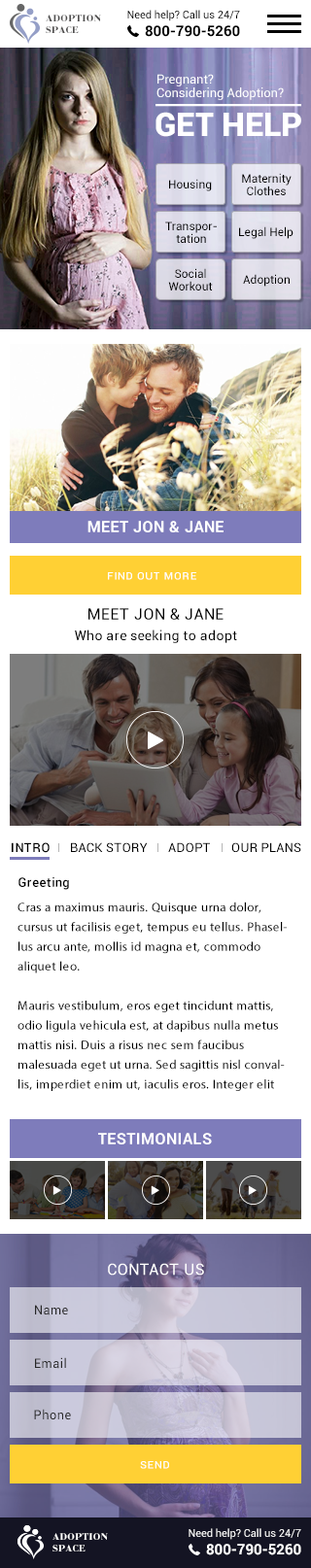
<style>
.page{position:relative;width:311px;height:1568px;background:#ffffff}
.page>*{position:absolute;margin:0}
.t1{font:8.7px/6.8px "Bradobrei";color:#4f4e4e;text-transform:uppercase}
.t2{font:10.7px "Roboto-Regular";color:#000000}
.t3{font:14.6px "Roboto-Bold";color:#000000}
.t4{font:12.5px/8.7px "Roboto-Regular";color:#ffffff}
.t5{font:32.8px "Roboto-Black";color:#ffffff;text-transform:uppercase}
.t6{font:11.7px/8.8px "Roboto-Regular";color:#000000}
.t7{font:11.7px "Roboto-Regular";color:#000000}
.t8{font:15.5px "Roboto-Bold";letter-spacing:0.03em;color:#ffffff;text-transform:uppercase}
.t9{font:12.6px "Roboto-Regular";letter-spacing:0.03em;color:#ffffff;font-variant:small-caps}
.t10{font:15.5px "Roboto-Regular";letter-spacing:0.03em;color:#010101;text-transform:uppercase}
.t11{font:13.6px "Roboto-Regular";letter-spacing:0.03em;color:#000000}
.t12{font:12.6px "Roboto-Medium";letter-spacing:0.03em;color:#000000;text-transform:uppercase}
.t13{font:12.6px "Roboto-Regular";letter-spacing:0.03em;color:#000000;text-transform:uppercase}
.t14{font:12.6px "Roboto-Medium";letter-spacing:0.03em;color:#000000}
.t15{font:12.6px/19.7px "MyriadPro-Regular";letter-spacing:0.03em;color:#000000}
.t16{font:15.5px "Roboto-Regular";letter-spacing:0.03em;color:#ffffff;text-transform:uppercase}
.t17{font:12.6px "Roboto-Regular";letter-spacing:0.04em;color:#282828}
.t18{font:10.7px "Roboto-Regular";color:#ffffff}
.t19{font:8.7px/6.8px "Bradobrei";color:#ffffff;text-transform:uppercase}
.t20{font:14.6px "Roboto-Bold";color:#ffffff}
</style>
<div class="page">
<p class="t1" style="left:46px;top:15px;width:55px;height:18px">Adoption <br>Space</p>
<p class="t2" style="left:127px;top:10px;width:113px;height:11px">Need help? Call us 24/7</p>
<p class="t3" style="left:145px;top:25px;width:95px;height:12px">800-790-5260</p>
<p class="t4" style="left:156px;top:74px;width:128px;height:26px">Pregnant?<br>Considering Adoption?</p>
<p class="t5" style="left:155px;top:112px;width:146px;height:25px">Get Help</p>
<p class="t6" style="left:242px;top:173px;width:49px;height:22px;text-align:center">Maternity<br>Clothes</p>
<p class="t7" style="left:169px;top:179px;width:43px;height:12px">Housing</p>
<p class="t6" style="left:165px;top:222px;width:52px;height:21px;text-align:center">Transpor-<br>tation</p>
<p class="t7" style="left:239px;top:226px;width:54px;height:13px">Legal Help</p>
<p class="t6" style="left:168px;top:268px;width:45px;height:22px;text-align:center">Social<br>Workout</p>
<p class="t7" style="left:243px;top:274px;width:47px;height:13px">Adoption</p>
<p class="t8" style="left:87px;top:521px;width:136px;height:11px">Meet Jon &amp; Jane</p>
<p class="t9" style="left:108px;top:572px;width:88px;height:8px">Find out more</p>
<p class="t10" style="left:88px;top:608px;width:135px;height:12px">Meet Jon &amp; Jane</p>
<p class="t11" style="left:75px;top:630px;width:162px;height:13px">Who are seeking to adopt</p>
<p class="t12" style="left:12px;top:842px;width:38px;height:11px">Intro</p>
<p class="t13" style="left:71px;top:842px;width:77px;height:10px">Back Story</p>
<p class="t13" style="left:168px;top:842px;width:42px;height:10px">Adopt</p>
<p class="t13" style="left:231px;top:842px;width:70px;height:10px">Our Plans</p>
<p class="t14" style="left:18px;top:877px;width:51px;height:13px">Greeting</p>
<p class="t15" style="left:17px;top:902px;width:270px;height:189px">Cras a maximus mauris. Quisque urna dolor, cursus ut facilisis eget, tempus eu tellus. Phasellus arcu ante, mollis id magna et, commodo aliquet leo. <br><br>Mauris vestibulum, eros eget tincidunt mattis, odio ligula vehicula est, at dapibus nulla metus mattis nisi. Duis a risus nec sem faucibus malesuada eget ut urna. Sed sagittis nisl convallis, imperdiet enim ut, iaculis eros. Integer elit nunc, accumsan eget ullamcorper a, interdum vitae magna.</p>
<p class="t8" style="left:98px;top:1133px;width:114px;height:11px">Testimonials</p>
<p class="t16" style="left:108px;top:1263px;width:96px;height:13px">Contact us</p>
<p class="t17" style="left:35px;top:1305px;width:33px;height:10px">Name</p>
<p class="t17" style="left:35px;top:1357px;width:31px;height:12px">Email</p>
<p class="t17" style="left:34px;top:1409px;width:37px;height:11px">Phone</p>
<p class="t9" style="left:140px;top:1461px;width:29px;height:8px">send</p>
<p class="t18" style="left:188px;top:1528px;width:113px;height:12px">Need help? Call us 24/7</p>
<p class="t19" style="left:52px;top:1533px;width:56px;height:18px">Adoption <br>Space</p>
<p class="t20" style="left:206px;top:1544px;width:95px;height:11px">800-790-5260</p>
</div>
